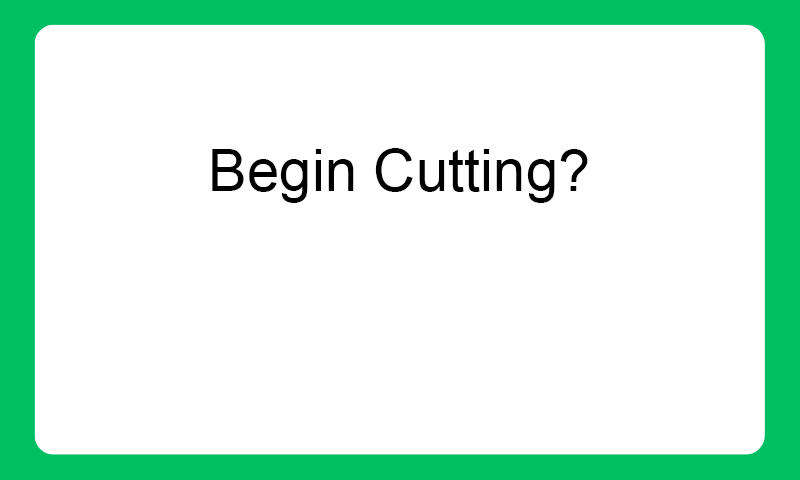
<style>
.page{position:relative;width:800px;height:480px;background:#ffffff}
.page>*{position:absolute;margin:0}
.t1{font:58.3px "ArialMT";color:#000000}
</style>
<div class="page">
<p class="t1" style="left:212px;top:148px;width:376px;height:55px">Begin Cutting?</p>
</div>
